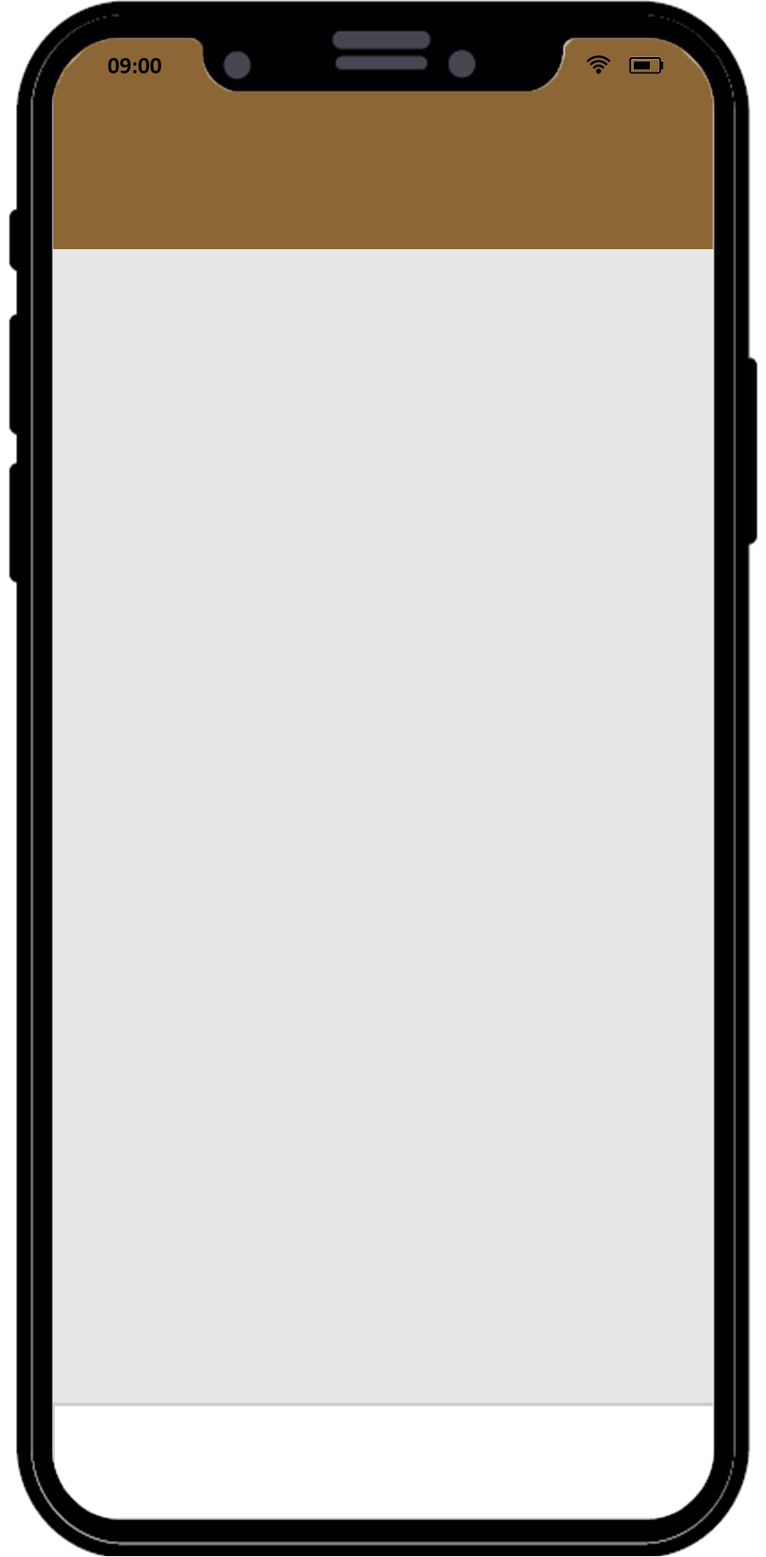
<style>
.page{position:relative;width:766px;height:1557px;background:#e6e6e6}
.page>*{position:absolute;margin:0}
.t1{font:23.6px "Calibri-Bold";color:#000000}
</style>
<div class="page">
<p class="t1" style="left:107px;top:58px;width:54px;height:15px">09:00</p>
</div>
